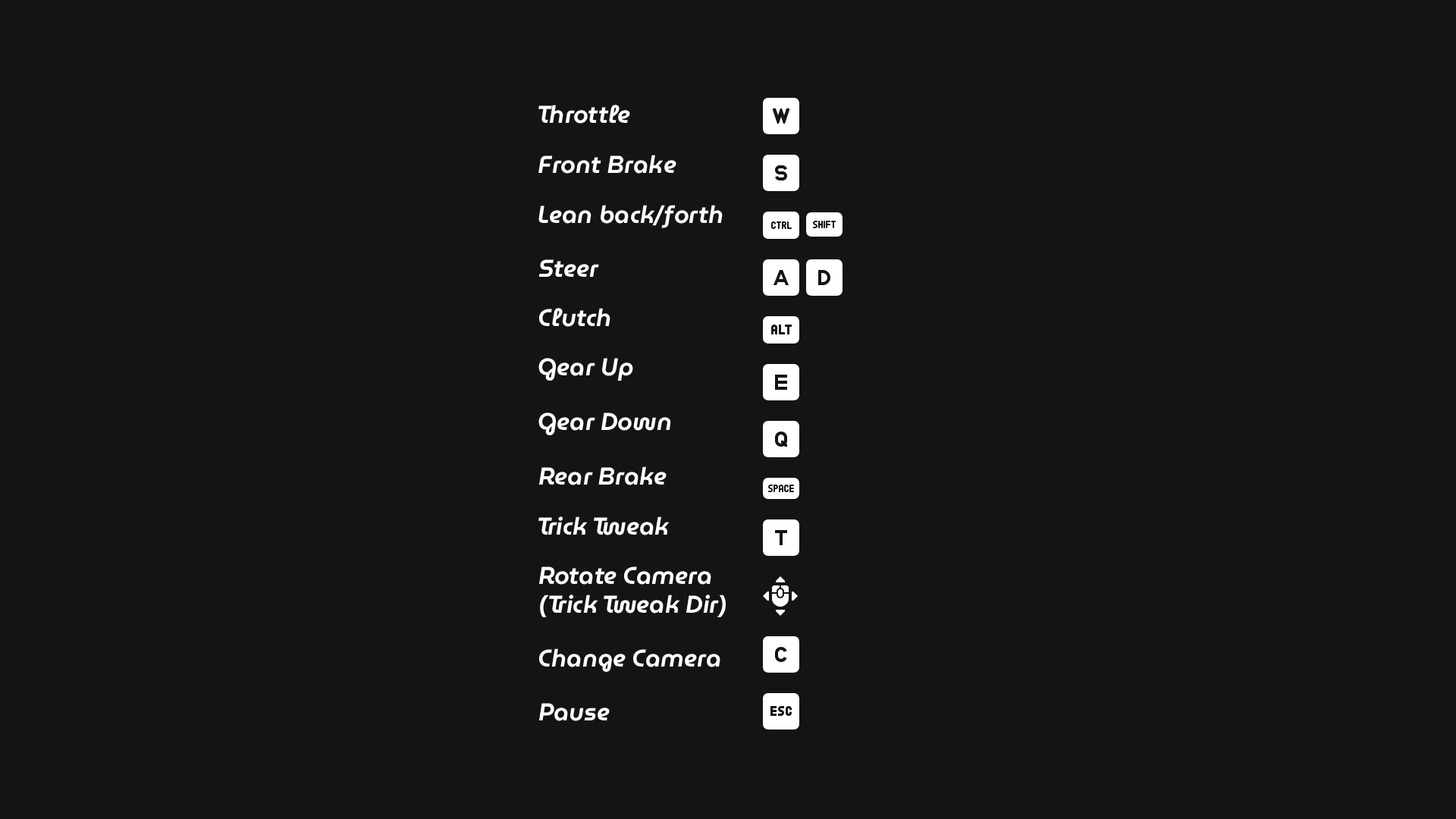
<style>
.page{position:relative;width:1456px;height:819px;background:#141414}
.page>*{position:absolute;margin:0}
.t1{font:24.3px "MuseoModernoItalic-SemiBold";color:#ffffff}
</style>
<div class="page">
<p class="t1" style="left:538px;top:105px;width:92px;height:19px">Throttle</p>
<p class="t1" style="left:538px;top:155px;width:138px;height:19px">Front Brake</p>
<p class="t1" style="left:538px;top:205px;width:185px;height:23px">Lean back/forth</p>
<p class="t1" style="left:538px;top:259px;width:61px;height:18px">Steer</p>
<p class="t1" style="left:538px;top:308px;width:72px;height:19px">Clutch</p>
<p class="t1" style="left:538px;top:358px;width:95px;height:23px">Gear Up</p>
<p class="t1" style="left:538px;top:413px;width:133px;height:22px">Gear Down</p>
<p class="t1" style="left:538px;top:466px;width:129px;height:19px">Rear Brake</p>
<p class="t1" style="left:538px;top:516px;width:132px;height:19px">Trick Tweak</p>
<p class="t1" style="left:538px;top:566px;width:188px;height:51px">Rotate Camera<br>(Trick Tweak Dir)</p>
<p class="t1" style="left:538px;top:648px;width:182px;height:24px">Change Camera</p>
<p class="t1" style="left:538px;top:703px;width:72px;height:18px">Pause</p>
</div>
